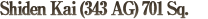
<style>
.page{position:relative;width:208px;height:19px;background:#ffffff}
.page>*{position:absolute;margin:0}
.t1{font:18px "RyuminPro-ExBold";letter-spacing:-0.08em;color:#4a3f32;font-weight:bold;scale:0.9 1}
</style>
<div class="page">
<p class="t1" style="left:0px;top:0px;width:189px;height:19px">Shiden Kai (343 AG) 701 Sq.</p>
</div>
